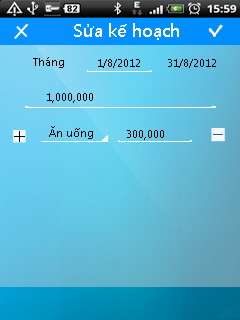
<style>
.page{position:relative;width:240px;height:320px}
.page>*{position:absolute;margin:0}
.t1{font:18.3px "SegoeUI-SemiBold";color:#ffffff}
.t2{font:11.5px "SegoeUI";color:#000000}
</style>
<div class="page">
<p class="t1" style="left:74px;top:23px;width:105px;height:17px">Sửa kế hoạch</p>
<p class="t2" style="left:33px;top:57px;width:31px;height:11px">Tháng</p>
<p class="t2" style="left:98px;top:59px;width:42px;height:9px">1/8/2012</p>
<p class="t2" style="left:168px;top:59px;width:48px;height:9px">31/8/2012</p>
<p class="t2" style="left:47px;top:93px;width:46px;height:10px">1,000,000</p>
<p class="t2" style="left:49px;top:126px;width:44px;height:13px">Ăn uống</p>
<p class="t2" style="left:127px;top:130px;width:37px;height:10px">300,000</p>
</div>
